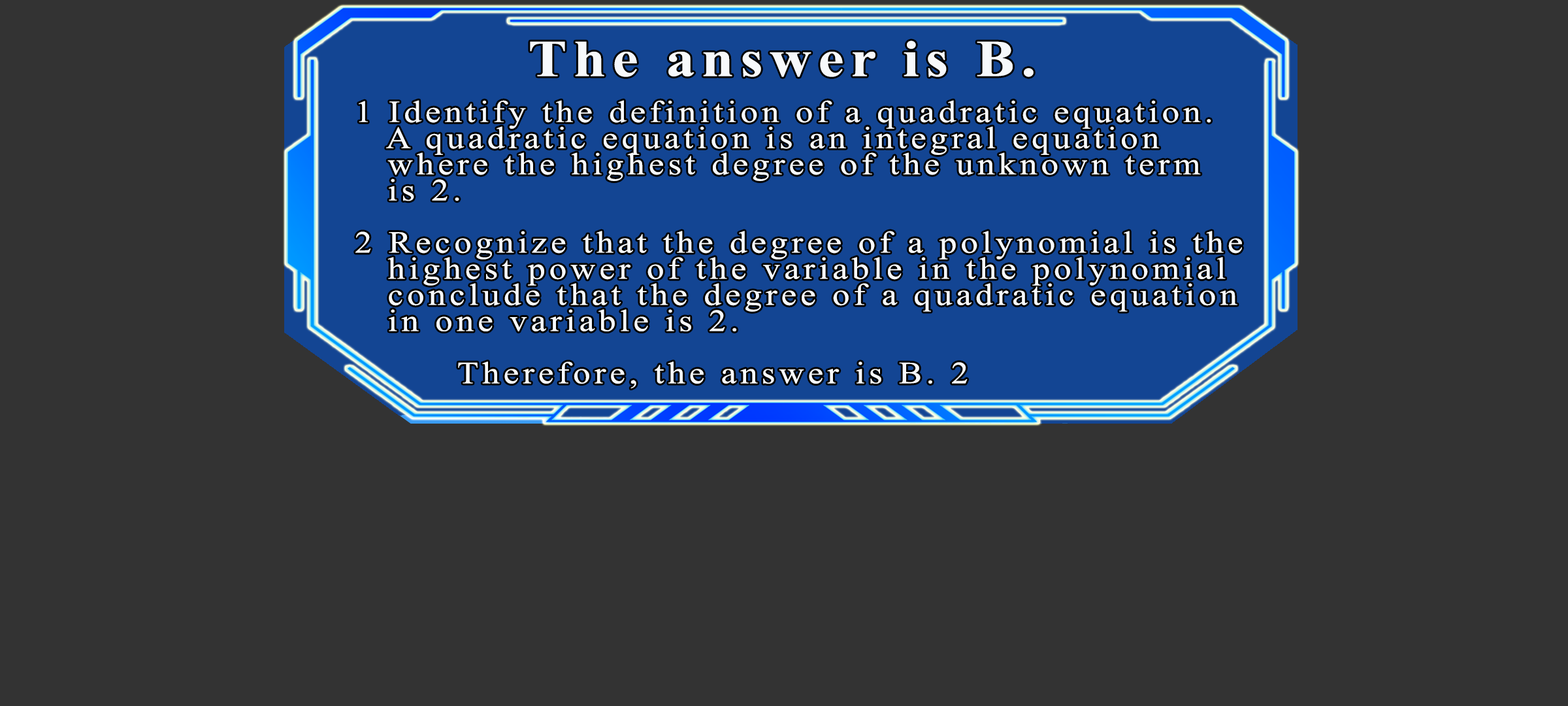
<style>
.page{position:relative;width:1568px;height:706px;background:#333333}
.page>*{position:absolute;margin:0}
.t1{font:51.7px "TimesNewRomanPS-BoldMT";letter-spacing:0.115em;color:#f7f9fb;scale:1.12 1}
.t2{font:30.9px/26.1px "TimesNewRomanPSMT";letter-spacing:0.115em;color:#f7f9fb;scale:1.12 1}
</style>
<div class="page">
<p class="t1" style="left:530px;top:41px;width:504px;height:36px">The answer is B.</p>
<p class="t2" style="left:355px;top:100px;width:887px;height:289px">1 Identify the definition of a quadratic equation.<br>  A quadratic equation is an integral equation<br>  where the highest degree of the unknown term<br>  is 2.<br><br>2 Recognize that the degree of a polynomial is the<br>  highest power of the variable in the polynomial<br>  conclude that the degree of a quadratic equation<br>  in one variable is 2.<br><br>      Therefore, the answer is B. 2</p>
</div>
